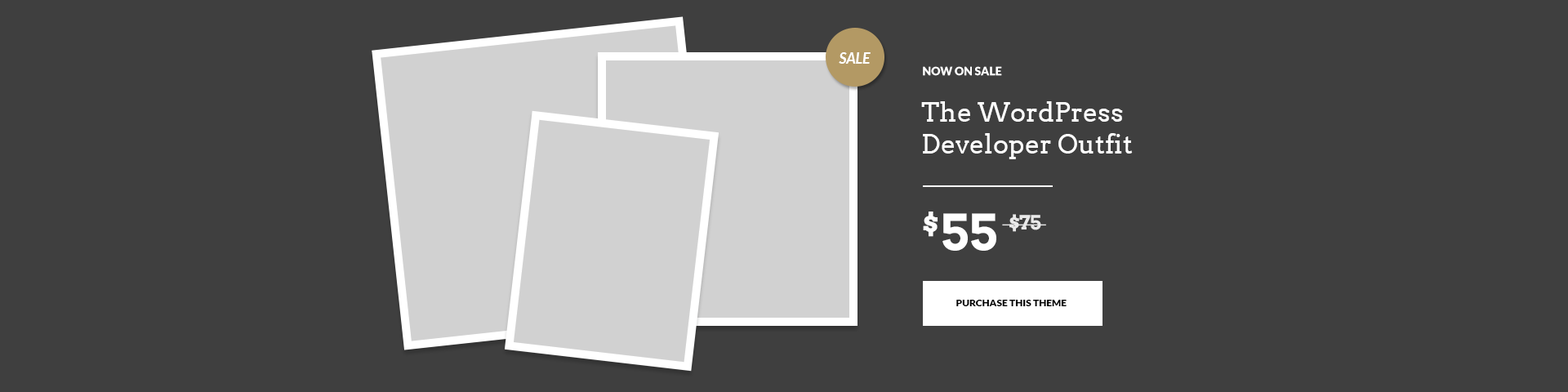
<style>
.page{position:relative;width:1568px;height:392px;background:#3f3f3f}
.page>*{position:absolute;margin:0}
.t1{font:11.4px "Lato-Black";color:#ffffff;text-transform:uppercase}
.t2{font:26.1px "Arvo";color:#ffffff}
.t3{font:49px "Arvo-Bold";color:#ffffff}
.t4{font:19.6px "Arvo-Bold";letter-spacing:-0.05em;color:#e9e9e9}
.t5{font:9.8px "Lato-Black";color:#000000;text-transform:uppercase}
</style>
<div class="page">
<p class="t1" style="left:923px;top:66px;width:79px;height:10px">NOW ON SALE</p>
<p class="t2" style="left:921px;top:101px;width:212px;height:58px">The WordPress Developer Outfit</p>
<p class="t3" style="left:923px;top:212px;width:73px;height:39px">$55</p>
<p class="t4" style="left:1002px;top:214px;width:44px;height:18px">$75</p>
<p class="t5" style="left:956px;top:300px;width:111px;height:6px">PURCHASE THIS THEME</p>
</div>
